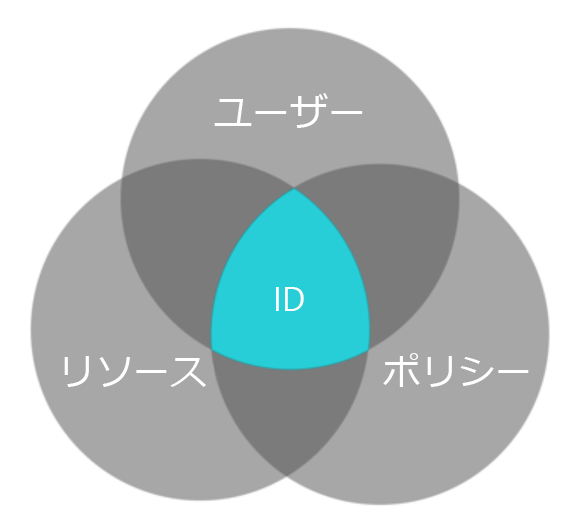
<style>
.page{position:relative;width:571px;height:520px;background:#ffffff}
.page>*{position:absolute;margin:0}
.t1{font:38px "Meiryo";color:#ffffff}
.t2{font:34.2px "SegoeUI";color:#ffffff;scale:0.96 1}
.t3{font:37.4px "Meiryo";color:#ffffff}
</style>
<div class="page">
<p class="t1" style="left:214px;top:93px;width:149px;height:35px">ユーザー</p>
<p class="t2" style="left:276px;top:287px;width:28px;height:24px">ID</p>
<p class="t3" style="left:383px;top:353px;width:146px;height:34px">ポリシー</p>
<p class="t3" style="left:64px;top:356px;width:142px;height:31px">リソース</p>
</div>
